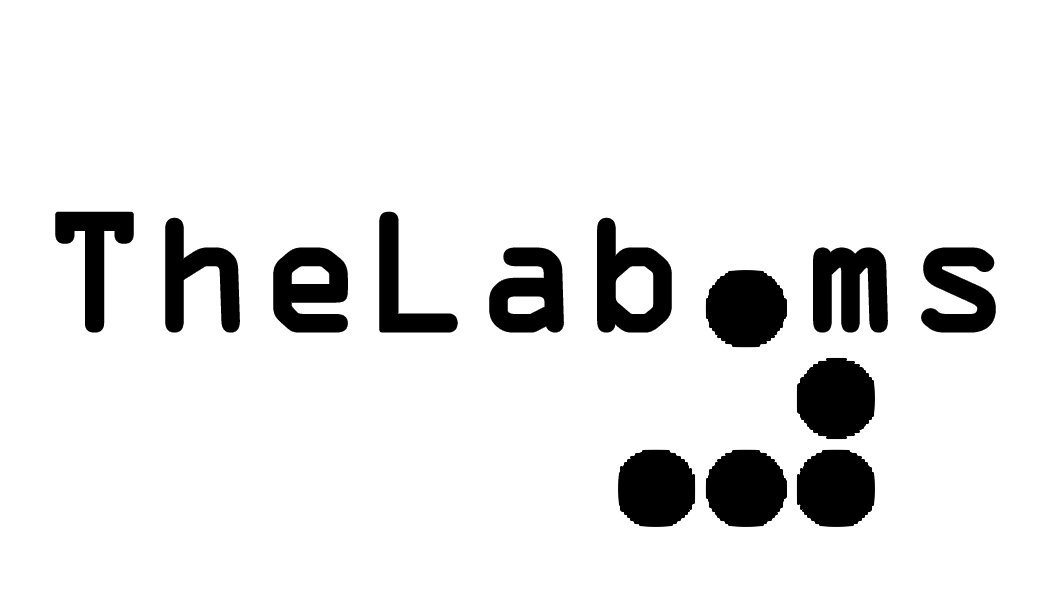
<style>
.page{position:relative;width:1050px;height:600px;background:#ffffff}
.page>*{position:absolute;margin:0}
.t1{font:150px "OCRAStd";color:#000000}
</style>
<div class="page">
<p class="t1" style="left:57px;top:213px;width:937px;height:118px">TheLab.ms</p>
</div>
